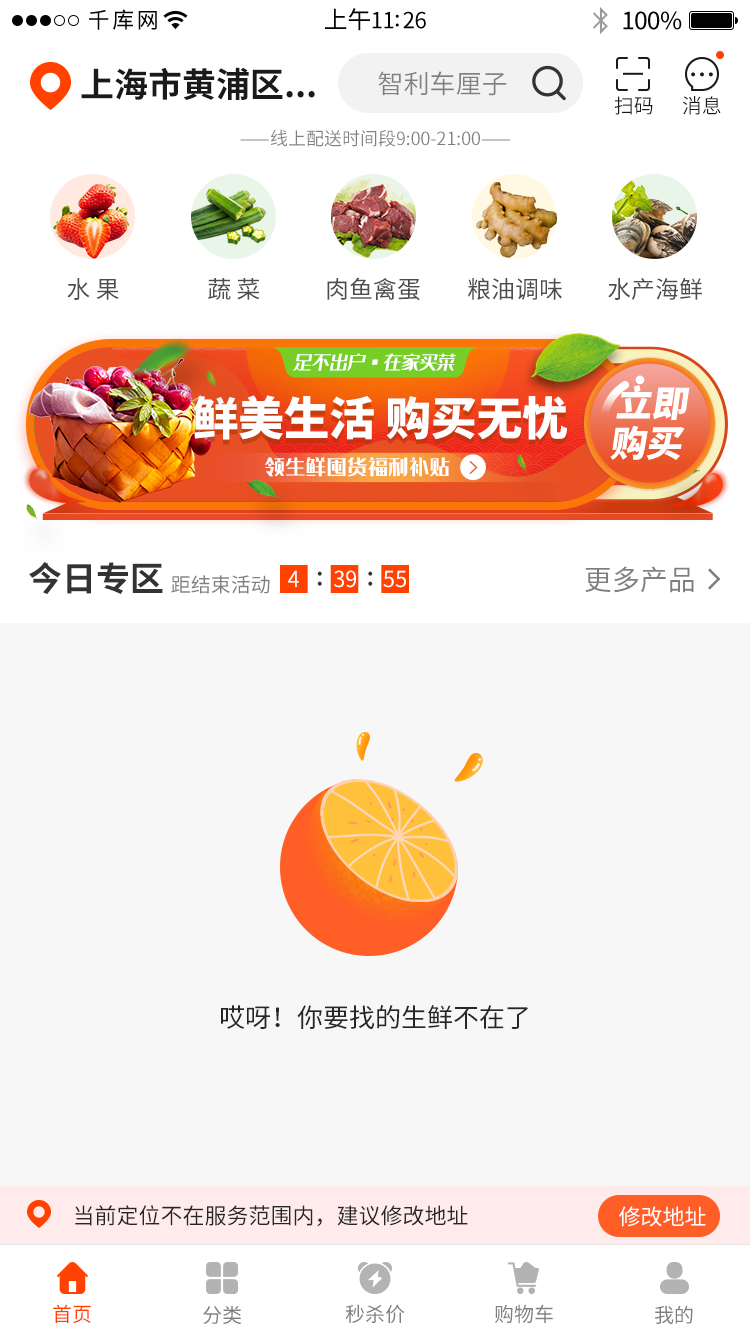
<style>
.page{position:relative;width:750px;height:1334px;background:#f7f7f7}
.page>*{position:absolute;margin:0}
.t1{font:22px "SourceHanSansCN-Regular";letter-spacing:0.12em;color:#030303}
.t2{font:22px "SourceHanSansCN-Regular";letter-spacing:-0.02em;color:#030303}
.t3{font:24px "SourceHanSansCN-Regular";letter-spacing:-0.02em;color:#030303}
.t4{font:34px "SourceHanSansCN-Bold";color:#1a1a1a}
.t5{font:26px "SourceHanSansCN-Normal";color:#808080}
.t6{font:20px "SourceHanSansCN-Normal";color:#1a1a1a}
.t7{font:18px "SourceHanSansCN-Normal";color:#808080}
.t8{font:24px "SourceHanSansCN-Regular";color:#4d4d4d}
.t9{font:17.4px "35--Regular";letter-spacing:0.03em;color:#ffffff;text-transform:uppercase;font-style:italic}
.t10{font:36.4px/40.4px "SourceHanSansCN-Heavy";color:#ffffff;text-transform:uppercase}
.t11{font:45.5px "SourceHanSansCN-Heavy";color:#ffffff}
.t12{font:19.2px "35--Regular";letter-spacing:0.06em;color:#ffffff}
.t13{font:34px "SourceHanSansCN-Bold";color:#333333}
.t14{font:28px "SourceHanSansCN-Regular";color:#808080}
.t15{font:20px "SourceHanSansCN-Regular";color:#808080}
.t16{font:22px "SourceHanSansCN-Regular";color:#fffefe}
.t17{font:25.7px "SourceHanSansCN-Medium";color:#333333}
.t18{font:26px "SourceHanSansCN-Regular";color:#262626}
.t19{font:22px "SourceHanSansCN-Regular";color:#262626}
.t20{font:22px "SourceHanSansCN-Regular";color:#ffffff}
.t21{font:20px "SourceHanSansCN-Regular";color:#ff4200}
</style>
<div class="page">
<p class="t1" style="left:89px;top:9px;width:68px;height:21px">千库网</p>
<p class="t2" style="left:325px;top:8px;width:101px;height:23px"><span class="t3">上午</span>11:26</p>
<p class="t3" style="left:623px;top:11px;width:59px;height:19px">100%</p>
<p class="t4" style="left:81px;top:67px;width:234px;height:33px">上海市黄浦区...</p>
<p class="t5" style="left:378px;top:71px;width:129px;height:25px">智利车厘子</p>
<p class="t6" style="left:614px;top:96px;width:39px;height:19px">扫码</p>
<p class="t6" style="left:682px;top:96px;width:39px;height:19px">消息</p>
<p class="t7" style="left:240px;top:129px;width:271px;height:18px">——线上配送时间段9:00-21:00——</p>
<p class="t8" style="left:67px;top:278px;width:52px;height:22px">水 果</p>
<p class="t8" style="left:208px;top:278px;width:52px;height:22px">蔬 菜</p>
<p class="t8" style="left:327px;top:277px;width:93px;height:24px">肉鱼禽蛋</p>
<p class="t8" style="left:468px;top:278px;width:94px;height:22px">粮油调味</p>
<p class="t8" style="left:608px;top:278px;width:94px;height:22px">水产海鲜</p>
<p class="t9" style="left:293px;top:353px;width:164px;height:18px">足不出户·在家买菜</p>
<p class="t10" style="left:610px;top:385px;width:80px;height:75px">立即<br>购买</p>
<p class="t11" style="left:193px;top:395px;width:374px;height:45px">鲜美生活 购买无忧</p>
<p class="t12" style="left:265px;top:457px;width:185px;height:20px">领生鲜囤货福利补贴</p>
<p class="t13" style="left:29px;top:562px;width:134px;height:33px">今日专区</p>
<p class="t14" style="left:585px;top:566px;width:109px;height:27px">更多产品</p>
<p class="t15" style="left:171px;top:575px;width:99px;height:19px">距结束活动</p>
<p class="t16" style="left:288px;top:570px;width:11px;height:17px">4</p>
<p class="t17" style="left:317px;top:571px;width:5px;height:15px">:</p>
<p class="t16" style="left:334px;top:570px;width:22px;height:18px">39</p>
<p class="t17" style="left:368px;top:571px;width:5px;height:15px">:</p>
<p class="t16" style="left:383px;top:570px;width:23px;height:18px">55</p>
<p class="t18" style="left:221px;top:1005px;width:307px;height:24px">哎呀！你要找的生鲜不在了</p>
<p class="t19" style="left:75px;top:1205px;width:393px;height:22px">当前定位不在服务范围内，建议修改地址</p>
<p class="t20" style="left:619px;top:1206px;width:87px;height:21px">修改地址</p>
<p class="t21" style="left:53px;top:1304px;width:38px;height:19px">首页</p>
<p class="t15" style="left:203px;top:1305px;width:39px;height:20px">分类</p>
<p class="t15" style="left:345px;top:1304px;width:60px;height:20px">秒杀价</p>
<p class="t15" style="left:495px;top:1304px;width:58px;height:20px">购物车</p>
<p class="t15" style="left:655px;top:1305px;width:38px;height:19px">我的</p>
</div>
